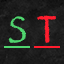
<style>
.page{position:relative;width:64px;height:64px}
.page>*{position:absolute;margin:0}
.t1{font:35.6px "DJBChalkItUp";letter-spacing:0.075em;color:#50d56f}
.t2{font:35.6px "DJBChalkItUp";letter-spacing:0.075em;color:#ff1d2e}
</style>
<div class="page">
<p class="t1" style="left:8px;top:16px;width:18px;height:27px">S</p>
<p class="t2" style="left:37px;top:15px;width:19px;height:28px">T</p>
</div>
